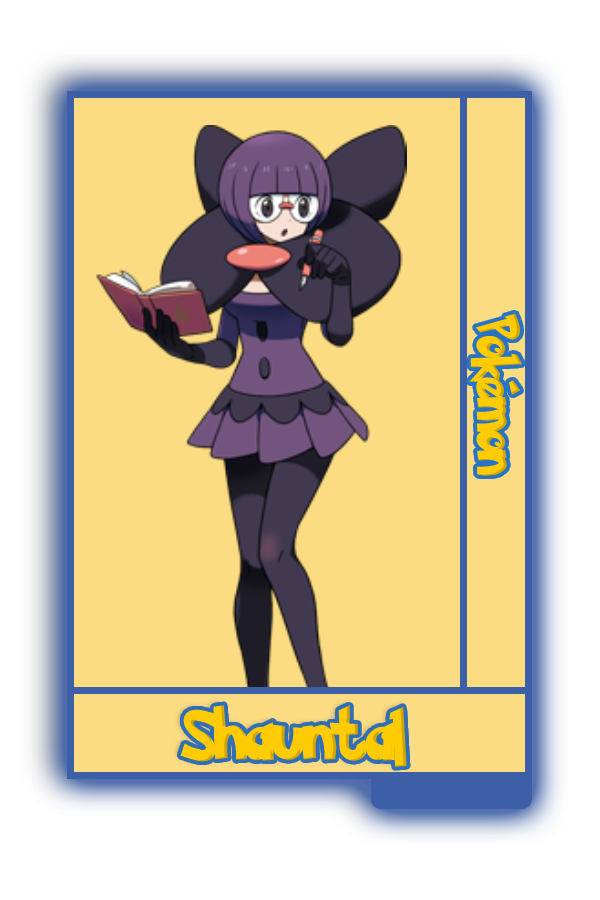
<style>
.page{position:relative;width:600px;height:900px;background:#fbdc83}
.page>*{position:absolute;margin:0}
.t1{font:48.8px "PokemonSolidNormal";color:#ffcb05;scale:0.8 1}
.t2{font:56.6px "PokemonSolidNormal";color:#ffcb05;scale:0.92 1}
</style>
<div class="page">
<p class="t1" style="left:469px;top:313px;width:54px;height:163px;rotate:90deg">Pokémon</p>
<p class="t2" style="left:180px;top:705px;width:227px;height:62px">Shauntal</p>
</div>
